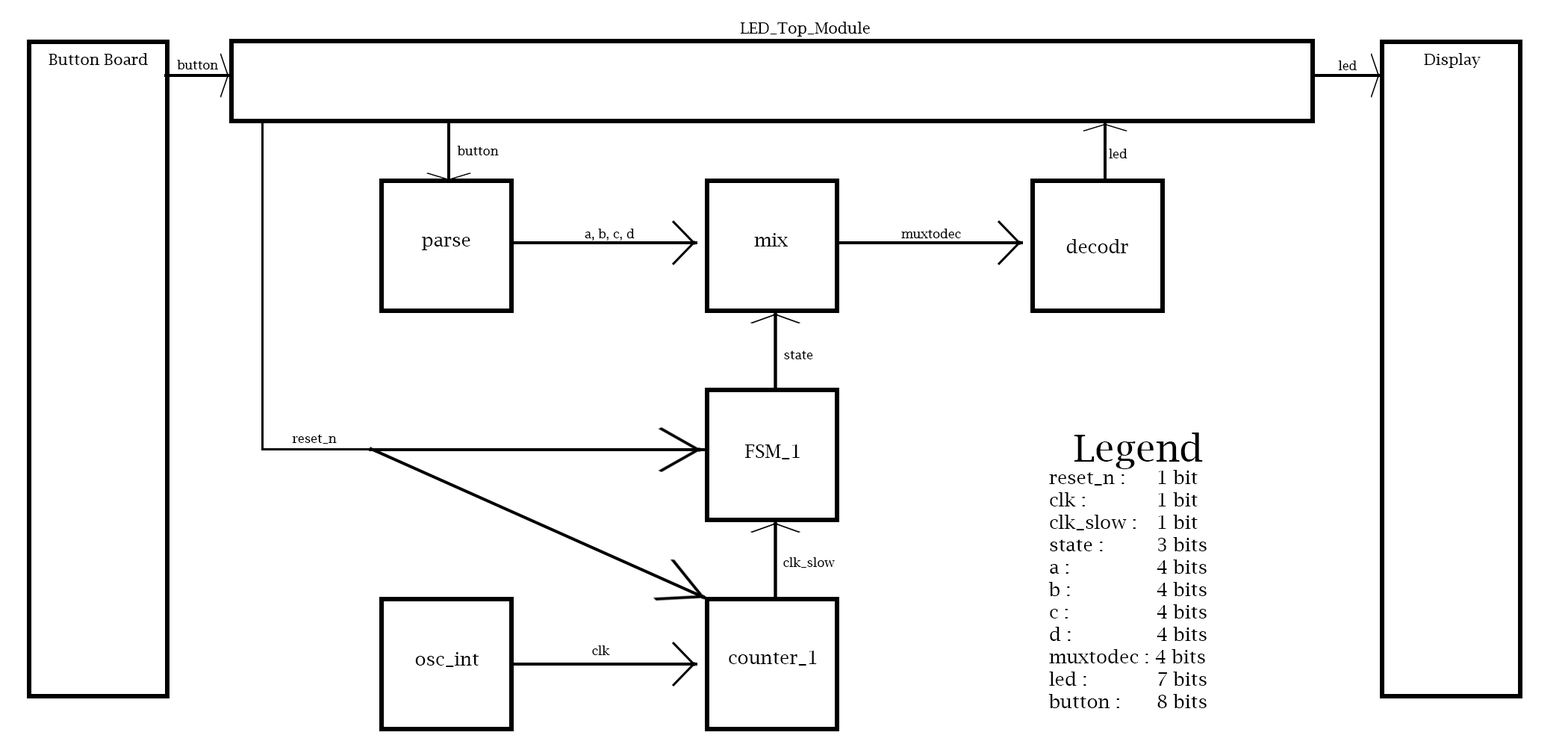
<style>
.page{position:relative;width:1568px;height:747px;background:#ffffff}
.page>*{position:absolute;margin:0}
.t1{font:15.6px "LucidaBright";color:#000000}
.t2{font:12.4px "LucidaBright";color:#000000}
.t3{font:18.7px "LucidaBright";color:#000000}
.t4{font:37.3px "LucidaBright";color:#000000}
</style>
<div class="page">
<p class="t1" style="left:740px;top:22px;width:130px;height:15px">LED_Top_Module</p>
<p class="t1" style="left:49px;top:53px;width:99px;height:12px">Button Board</p>
<p class="t1" style="left:1424px;top:53px;width:57px;height:15px">Display</p>
<p class="t2" style="left:177px;top:60px;width:42px;height:9px">button</p>
<p class="t2" style="left:1338px;top:60px;width:19px;height:10px">led</p>
<p class="t2" style="left:457px;top:146px;width:42px;height:9px">button</p>
<p class="t2" style="left:1109px;top:149px;width:18px;height:9px">led</p>
<p class="t2" style="left:585px;top:228px;width:50px;height:12px">a, b, c, d</p>
<p class="t3" style="left:754px;top:233px;width:34px;height:13px">mix</p>
<p class="t2" style="left:901px;top:228px;width:60px;height:10px">muxtodec</p>
<p class="t3" style="left:422px;top:237px;width:48px;height:13px">parse</p>
<p class="t3" style="left:1066px;top:239px;width:62px;height:14px">decodr</p>
<p class="t2" style="left:784px;top:350px;width:29px;height:9px">state</p>
<p class="t2" style="left:292px;top:434px;width:45px;height:10px">reset_n</p>
<p class="t3" style="left:1048px;top:432px;width:159px;height:276px;text-align:center"><span class="t4">Legend<br></span>reset_n :  1 bit<br>clk :    1 bit<br>clk_slow :  1 bit<br>state :   3 bits <br>a :    4 bits<br>b :    4 bits<br>c :     4 bits<br>d :    4 bits<br>muxtodec : 4 bits<br>led :    7 bits<br>button :   8 bits</p>
<p class="t3" style="left:745px;top:444px;width:55px;height:15px">FSM_1</p>
<p class="t2" style="left:783px;top:557px;width:52px;height:10px">clk_slow</p>
<p class="t3" style="left:415px;top:652px;width:64px;height:15px">osc_int</p>
<p class="t2" style="left:592px;top:645px;width:18px;height:10px">clk</p>
<p class="t3" style="left:729px;top:650px;width:88px;height:15px">counter_1</p>
</div>
